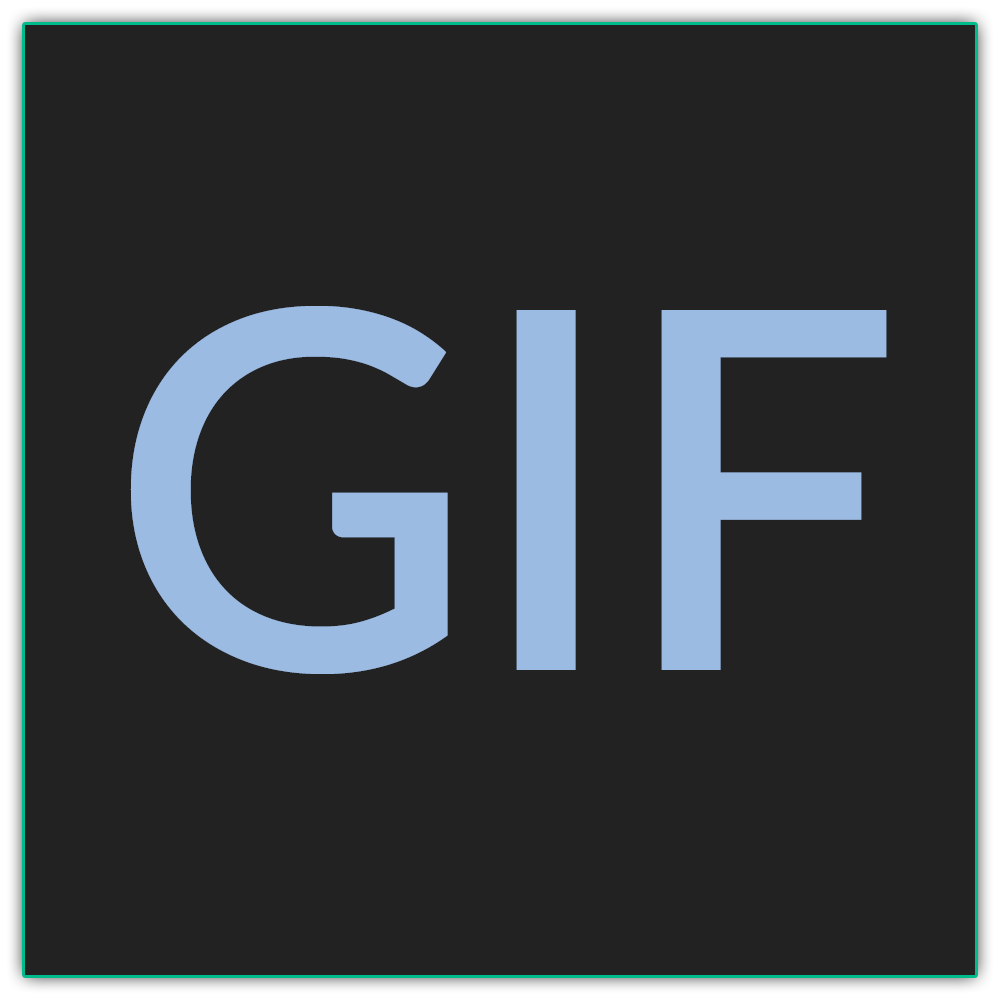
<style>
.page{position:relative;width:1000px;height:1000px;background:#222222}
.page>*{position:absolute;margin:0}
.t1{font:500px "Lato-Semibold";color:#9cbbe2}
</style>
<div class="page">
<p class="t1" style="left:130px;top:306px;width:757px;height:368px">GIF</p>
</div>
